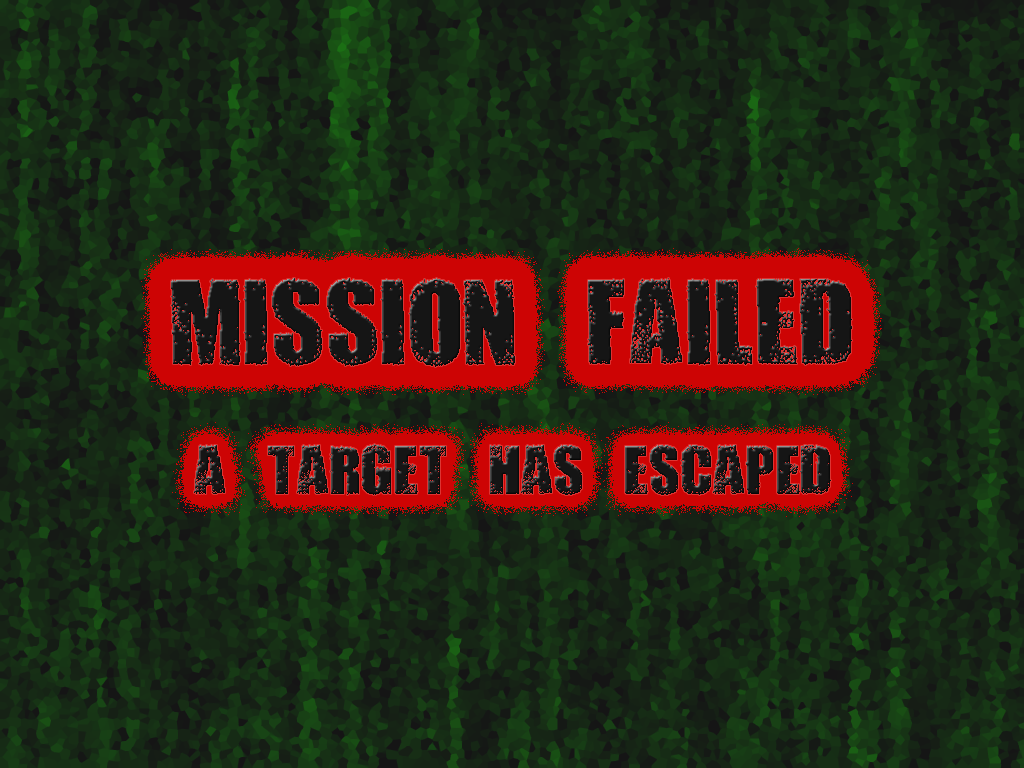
<style>
.page{position:relative;width:1024px;height:768px}
.page>*{position:absolute;margin:0}
.t1{font:140px "DIRTYBAGBOLDTRIAL";color:#151515}
.t2{font:80px "DIRTYBAGBOLDTRIAL";color:#151515}
</style>
<div class="page">
<p class="t1" style="left:171px;top:278px;width:681px;height:89px">Mission Failed</p>
<p class="t2" style="left:194px;top:444px;width:637px;height:51px">A target has escaped</p>
</div>
